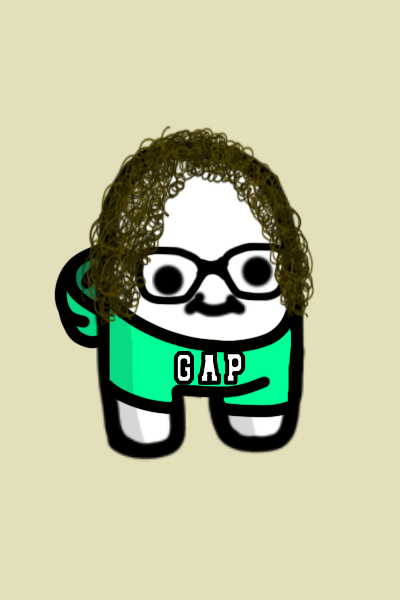
<style>
.page{position:relative;width:400px;height:600px;background:#e3dfba}
.page>*{position:absolute;margin:0}
.t1{font:46.5px "BeTrueToYourSchool-Regular";letter-spacing:0.156em;font-weight:bold;scale:0.77 1}
</style>
<div class="page">
<p class="t1" style="left:175px;top:352px;width:69px;height:31px">GAP</p>
</div>
